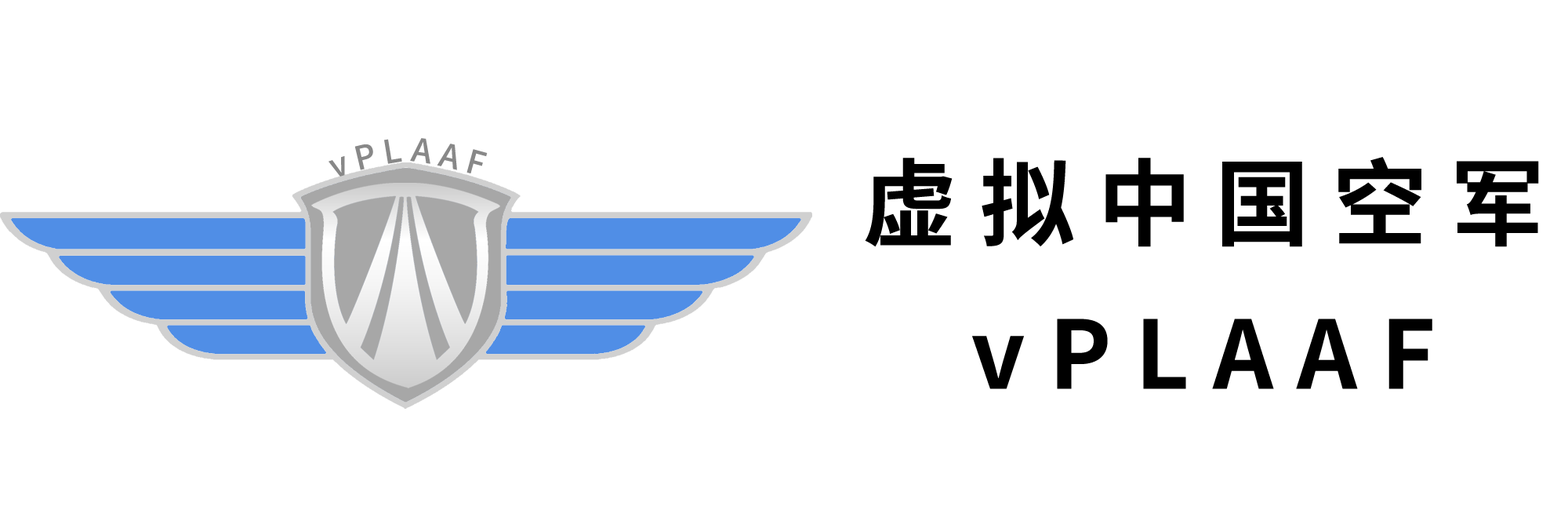
<style>
.page{position:relative;width:1568px;height:510px;background:#ffffff}
.page>*{position:absolute;margin:0}
.t1{font:32.4px "SourceHanSansSCVF-Medium";color:#888888;font-weight:bold}
.t2{font:94.1px "SourceHanSansSCVF-Bold";letter-spacing:0.25em;color:#000000;font-weight:bold}
</style>
<div class="page">
<p class="t1" style="left:328px;top:138px;width:160px;height:38px;rotate:-1deg">v P L A A F</p>
<p class="t2" style="left:865px;top:157px;width:674px;height:90px">虚拟中国空军</p>
<p class="t2" style="left:972px;top:318px;width:460px;height:71px">vPLAAF</p>
</div>
